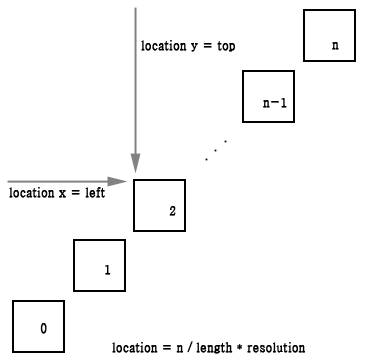
<style>
.page{position:relative;width:372px;height:362px;background:#ffffff}
.page>*{position:absolute;margin:0}
.t1{font:12px "Haansoft-Batang";color:#000000;font-weight:bold}
</style>
<div class="page">
<p class="t1" style="left:141px;top:40px;width:94px;height:12px">location y = top</p>
<p class="t1" style="left:332px;top:42px;width:7px;height:8px">n</p>
<p class="t1" style="left:263px;top:98px;width:24px;height:10px">n-1</p>
<p class="t1" style="left:9px;top:187px;width:96px;height:11px">location x = left</p>
<p class="t1" style="left:169px;top:206px;width:7px;height:10px">2</p>
<p class="t1" style="left:105px;top:265px;width:6px;height:10px">1</p>
<p class="t1" style="left:40px;top:323px;width:7px;height:11px">0</p>
<p class="t1" style="left:112px;top:341px;width:193px;height:13px">location = n / length * resolution</p>
</div>
